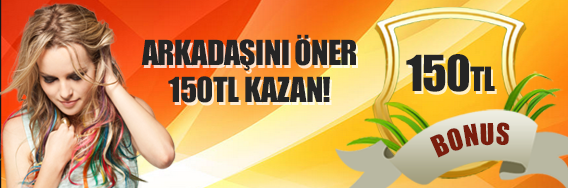
<style>
.page{position:relative;width:568px;height:188px}
.page>*{position:absolute;margin:0}
.t1{font:32px/36.7px "Impact";letter-spacing:-0.02em;color:#252525;text-transform:uppercase}
.t2{font:46px "Impact";letter-spacing:-0.02em;color:#252525;text-transform:uppercase}
.t3{font:31px "Impact";letter-spacing:-0.02em;color:#252525;text-transform:uppercase}
.t4{font:27.4px "Impact";color:#7a1d0d}
</style>
<div class="page">
<p class="t1" style="left:141px;top:34px;width:215px;height:69px;text-align:center">arkadaşını öner<br>150tl kazan!</p>
<p class="t2" style="left:406px;top:54px;width:89px;height:38px">150<span class="t3">tl</span></p>
<p class="t4" style="left:429px;top:122px;width:81px;height:36px">BONUS</p>
</div>
